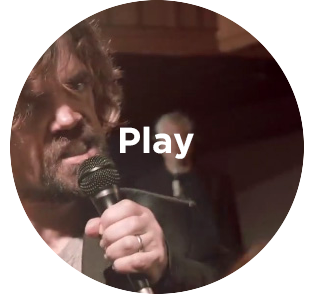
<style>
.page{position:relative;width:314px;height:294px;background:#ffffff}
.page>*{position:absolute;margin:0}
.t1{font:36px "Gotham-Bold";color:#ffffff}
</style>
<div class="page">
<p class="t1" style="left:120px;top:126px;width:74px;height:33px">Play</p>
</div>
